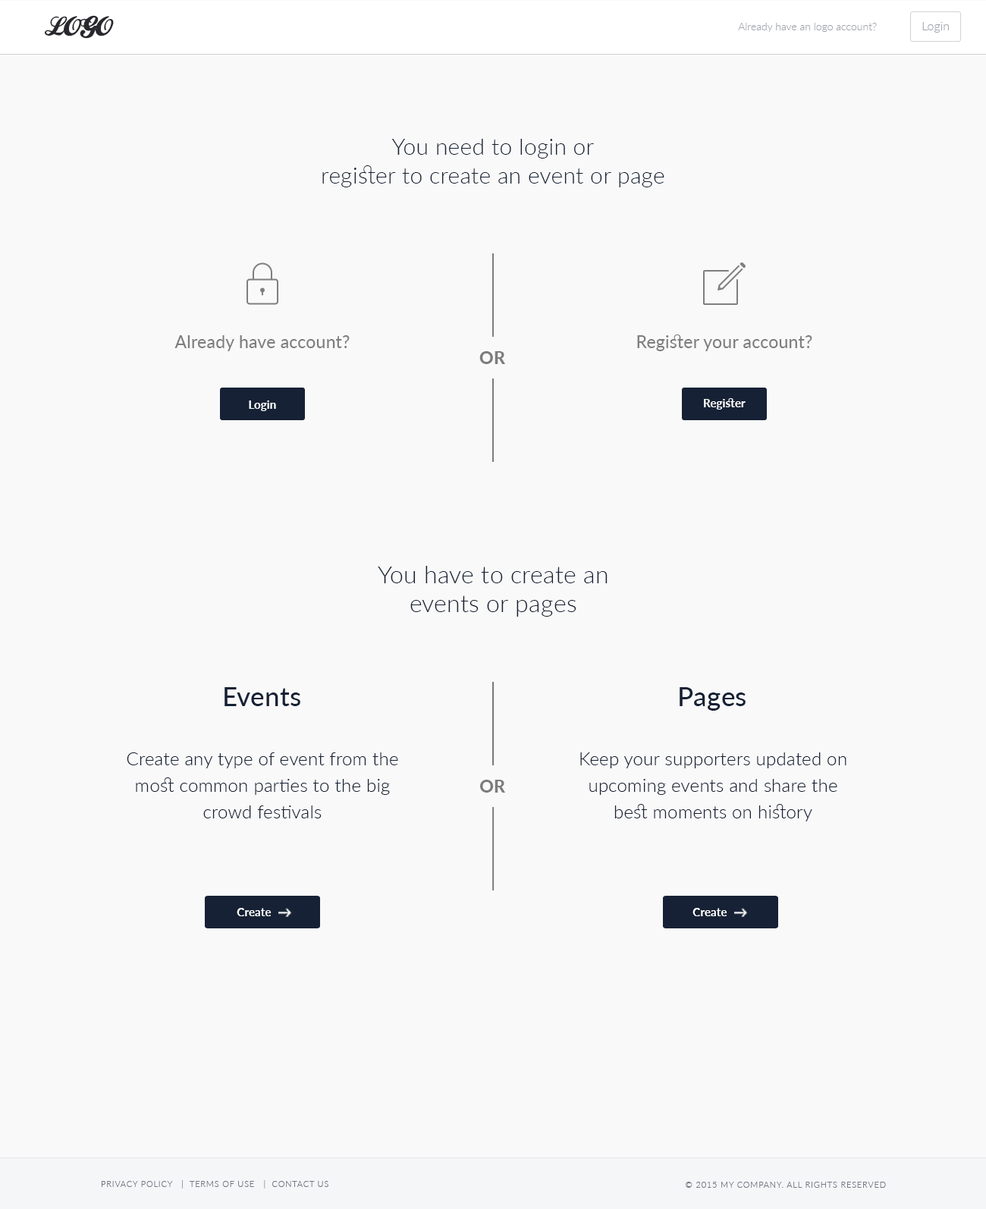
<style>
.page{position:relative;width:986px;height:1209px;background:#f9f9f9}
.page>*{position:absolute;margin:0}
.t1{font:26.5px "BallparkWeiner";color:#28282e}
.t2{font:10.6px "Lato-Light";color:#a3a6ae}
.t3{font:12.1px "Lato-Light";color:#a3a6ae}
.t4{font:22.8px/13.7px "Lato-Light";letter-spacing:0.01em;color:#162135}
.t5{font:17.4px "Lato-Regular";letter-spacing:0.01em;color:#7d7d7d}
.t6{font:17.4px "Lato-Heavy";letter-spacing:0.01em;color:#7d7d7d}
.t7{font:11.4px "Lato-Bold";letter-spacing:0.01em;color:#ffffff}
.t8{font:24.3px/13.7px "Lato-Light";letter-spacing:0.01em;color:#162135}
.t9{font:26.6px "Lato-Medium";letter-spacing:0.01em;color:#162135}
.t10{font:18.2px/26.6px "Lato-Light";letter-spacing:0.01em;color:#162135}
.t11{font:8.3px "Lato-Light";letter-spacing:0.075em;color:#747a85;text-transform:uppercase}
</style>
<div class="page">
<p class="t1" style="left:45px;top:15px;width:69px;height:24px">LOGO</p>
<p class="t2" style="left:738px;top:23px;width:139px;height:9px">Already have an logo account?</p>
<p class="t3" style="left:922px;top:22px;width:27px;height:11px">Login</p>
<p class="t4" style="left:322px;top:139px;width:343px;height:48px;text-align:center">You need to login or<br>register to create an event or page</p>
<p class="t5" style="left:174px;top:335px;width:176px;height:16px">Already have account?</p>
<p class="t5" style="left:637px;top:335px;width:175px;height:16px">Register your account?</p>
<p class="t6" style="left:479px;top:351px;width:26px;height:13px">OR</p>
<p class="t7" style="left:249px;top:401px;width:27px;height:10px">Login</p>
<p class="t7" style="left:704px;top:398px;width:42px;height:12px">Register</p>
<p class="t8" style="left:378px;top:566px;width:230px;height:51px;text-align:center">You have to create an<br>events or pages</p>
<p class="t9" style="left:225px;top:687px;width:75px;height:19px">Events</p>
<p class="t9" style="left:680px;top:687px;width:66px;height:24px">Pages</p>
<p class="t10" style="left:127px;top:753px;width:271px;height:66px;text-align:center">Create any type of event from the most common parties to the big crowd festivals</p>
<p class="t10" style="left:580px;top:753px;width:267px;height:69px;text-align:center">Keep your supporters updated on upcoming events and share the best moments on history</p>
<p class="t6" style="left:480px;top:780px;width:25px;height:13px">OR</p>
<p class="t7" style="left:237px;top:908px;width:35px;height:8px">Create</p>
<p class="t7" style="left:693px;top:908px;width:34px;height:8px">Create</p>
<p class="t11" style="left:102px;top:1180px;width:226px;height:9px">Privacy Policy   |  Terms of Use   |  Contact us</p>
<p class="t11" style="left:686px;top:1182px;width:200px;height:6px">© 2015 my company. All rights reserved</p>
</div>
